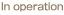
<style>
.page{position:relative;width:64px;height:15px;background:#ffffff}
.page>*{position:absolute;margin:0}
.t1{font:10px "GothicMB101Pro-DeBold";letter-spacing:-0.04em;color:#8b6e51}
</style>
<div class="page">
<p class="t1" style="left:1px;top:2px;width:62px;height:10px;opacity:0.9">In operation</p>
</div>
